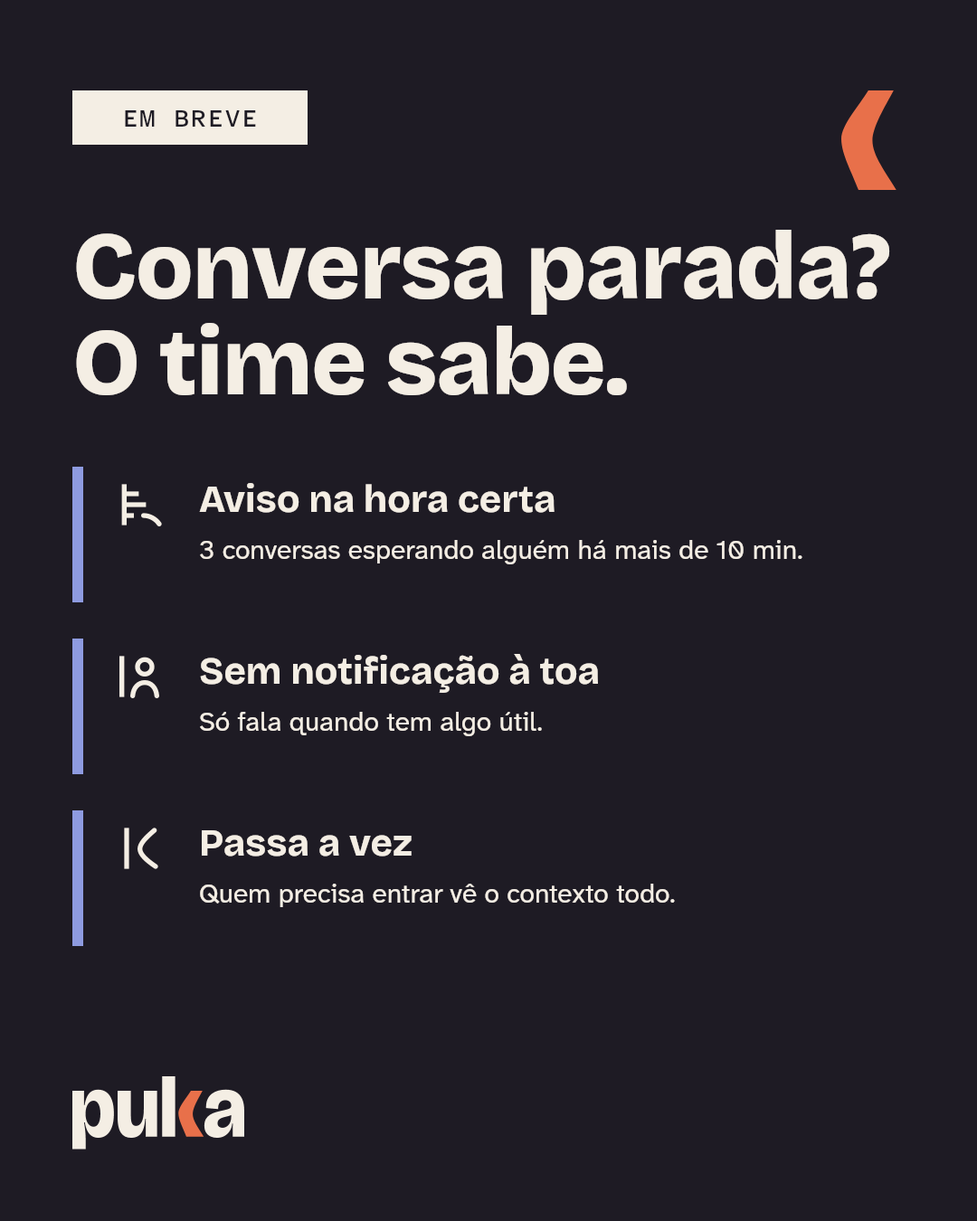
<style>
.page{position:relative;width:977px;height:1221px;background:#1e1b24}
.page>*{position:absolute;margin:0}
.t1{font:25.3px "AtkinsonHyperlegibleMono-Medium";letter-spacing:0.04em;color:#1e1b24}
.t2{font:94.1px/95.9px "BricolageGrotesque-ExtraBold";letter-spacing:-0.012em;color:#f4eee4}
.t3{font:38px "BricolageGrotesque-Bold";color:#f4eee4}
.t4{font:27.1px "AtkinsonHyperlegibleNext-Regular";color:#f4eee4}
</style>
<div class="page">
<p class="t1" style="left:125px;top:110px;width:131px;height:17px">EM BREVE</p>
<p class="t2" style="left:76px;top:230px;width:814px;height:165px">Conversa parada?<br>O time sabe.</p>
<p class="t3" style="left:199px;top:483px;width:355px;height:30px">Aviso na hora certa</p>
<p class="t4" style="left:200px;top:540px;width:602px;height:24px">3 conversas esperando alguém há mais de 10 min.</p>
<p class="t3" style="left:200px;top:654px;width:398px;height:39px">Sem notificação à toa</p>
<p class="t4" style="left:200px;top:712px;width:342px;height:24px">Só fala quando tem algo útil.</p>
<p class="t3" style="left:202px;top:830px;width:209px;height:26px">Passa a vez</p>
<p class="t4" style="left:200px;top:884px;width:475px;height:23px">Quem precisa entrar vê o contexto todo.</p>
</div>
